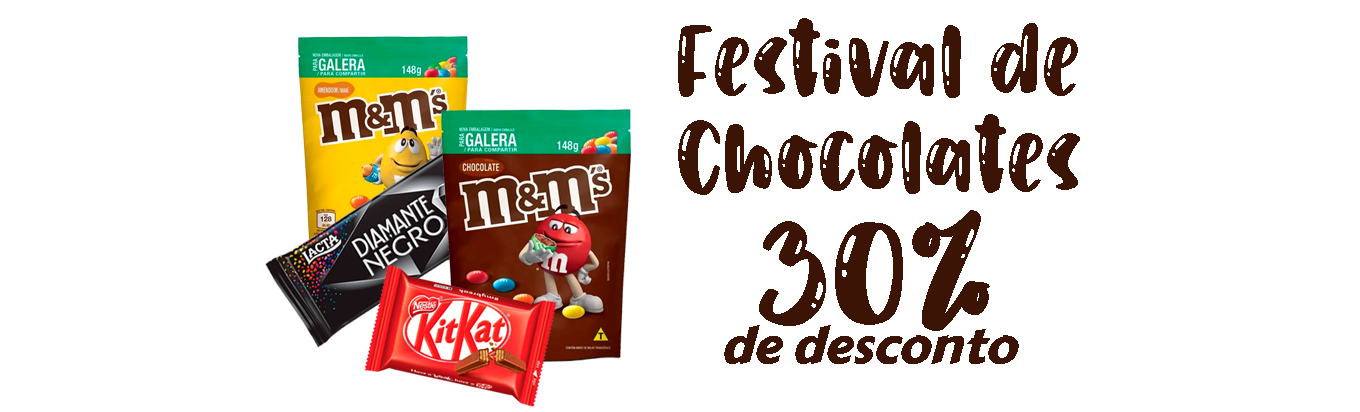
<style>
.page{position:relative;width:1360px;height:412px;background:#ffffff}
.page>*{position:absolute;margin:0}
.t1{font:72px "Humbleboysdemo";color:#3c1406}
.t2{font:110px "Humbleboysdemo";color:#3c1406}
.t3{font:50px "CarterOne";color:#3c1406;font-style:italic}
</style>
<div class="page">
<p class="t1" style="left:678px;top:18px;width:400px;height:80px">Festival de</p>
<p class="t1" style="left:678px;top:114px;width:402px;height:81px">Chocolates</p>
<p class="t2" style="left:759px;top:210px;width:231px;height:121px">30%</p>
<p class="t3" style="left:724px;top:325px;width:295px;height:39px">de desconto</p>
</div>
